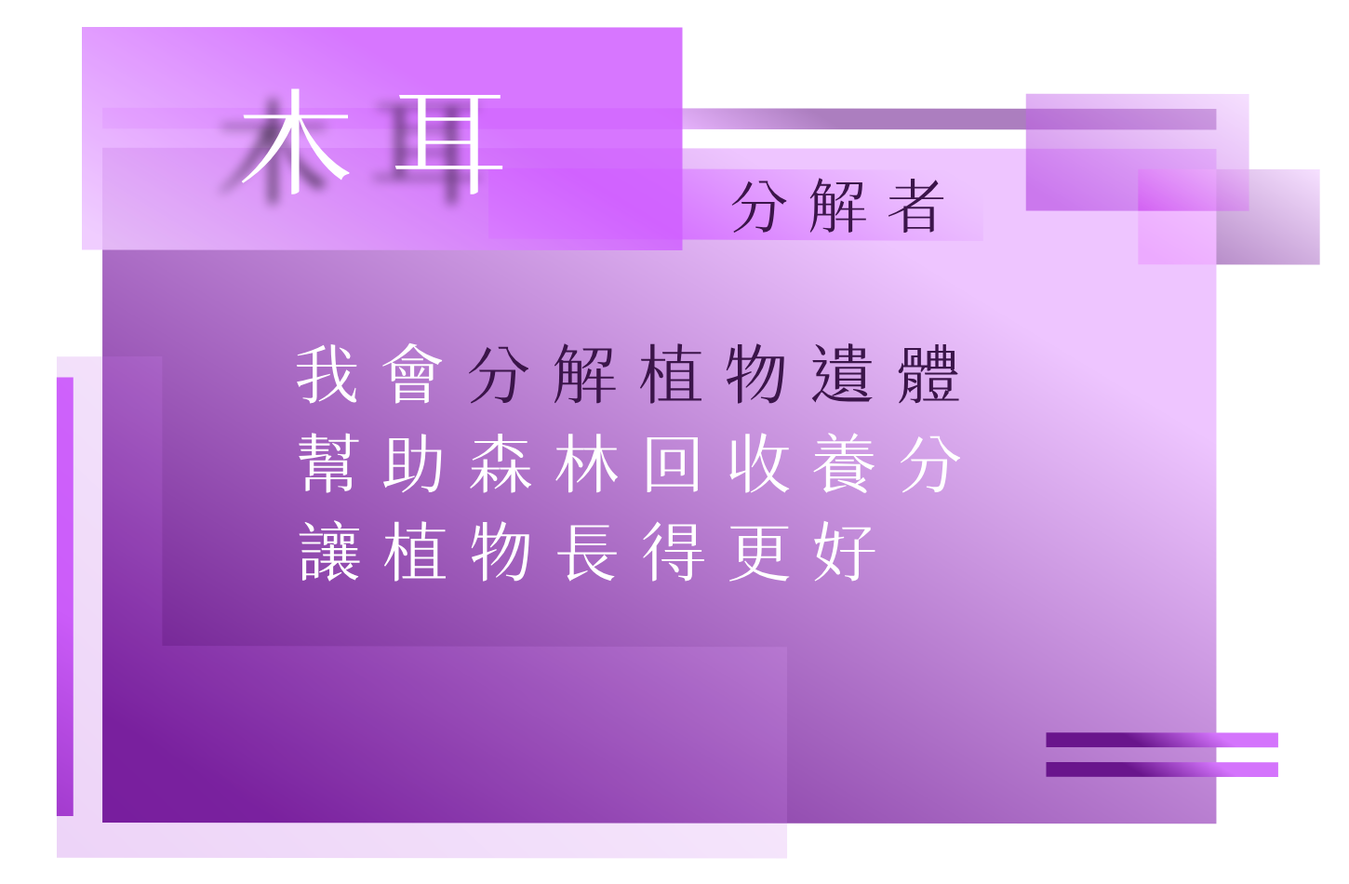
<style>
.page{position:relative;width:1349px;height:884px;background:#ffffff}
.page>*{position:absolute;margin:0}
.t1{font:116.3px "SweiSpringCJKtc-Regular";letter-spacing:0.32em;color:#ffffff;text-transform:uppercase}
.t2{font:59.5px "SweiSpringCJKtc-Regular";letter-spacing:0.32em;color:#3b154a;text-transform:uppercase}
.t3{font:65.1px "SweiSpringCJKtc-Regular";letter-spacing:0.32em;color:#3b154a;text-transform:uppercase}
.t4{font:65.1px "SweiSpringCJKtc-Regular";letter-spacing:0.32em;color:#ffffff;text-transform:uppercase}
</style>
<div class="page">
<p class="t1" style="left:241px;top:88px;width:262px;height:106px">木耳</p>
<p class="t2" style="left:731px;top:178px;width:213px;height:55px">分解者</p>
<p class="t3" style="left:296px;top:342px;width:663px;height:62px"><span class="t4">我會</span>分解植物遺體</p>
<p class="t4" style="left:299px;top:433px;width:662px;height:60px">幫助森林回收養分</p>
<p class="t4" style="left:299px;top:520px;width:577px;height:62px">讓植物長得更好</p>
</div>
